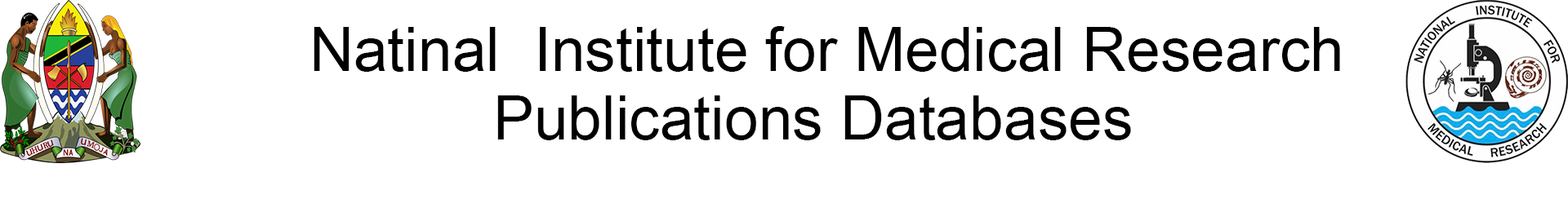
<style>
.page{position:relative;width:1568px;height:199px;background:#ffffff}
.page>*{position:absolute;margin:0}
.t1{font:61.2px "ArialMT";color:#000102}
.t2{font:61.2px "ArialMT";color:#000101}
</style>
<div class="page">
<p class="t1" style="left:314px;top:26px;width:1026px;height:46px">Natinal  Institute for Medical Research</p>
<p class="t2" style="left:497px;top:96px;width:634px;height:44px">Publications Databases</p>
</div>
